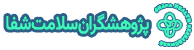
<style>
.page{position:relative;width:194px;height:50px;background:#ffffff}
.page>*{position:absolute;margin:0}
.t1{font:19.5px "Vazirmatn-Medium";letter-spacing:-0.05em;color:#3efaba;scale:0.85 1}
</style>
<div class="page">
<p class="t1" style="left:6px;top:13px;width:143px;height:23px">پژوهشگران سلامت شفا</p>
</div>
